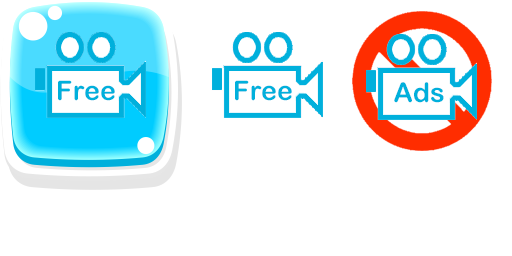
<style>
.page{position:relative;width:512px;height:256px;background:#ffffff}
.page>*{position:absolute;margin:0}
.t1{font:27px "ArialRoundedMTBold";color:#00b0dc}
</style>
<div class="page">
<p class="t1" style="left:58px;top:80px;width:57px;height:21px">Free</p>
<p class="t1" style="left:235px;top:80px;width:57px;height:21px">Free</p>
<p class="t1" style="left:394px;top:82px;width:50px;height:21px">Ads</p>
</div>
